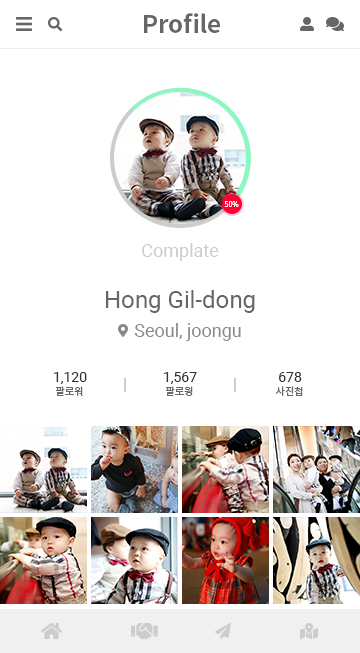
<style>
.page{position:relative;width:360px;height:653px;background:#ffffff}
.page>*{position:absolute;margin:0}
.t1{font:24px "NotoSansKR-Bold";color:#666666}
.t2{font:7px "NotoSansKR-Light";color:#ffffff}
.t3{font:18px "Roboto-Regular";color:#cccccc}
.t4{font:24px "Roboto-Regular";color:#666666}
.t5{font:18px "Roboto-Regular";color:#888888}
.t6{font:14px "Roboto-Regular";color:#333333}
.t7{font:10px "NotoSansKR-Regular";color:#666666}
</style>
<div class="page">
<p class="t1" style="left:144px;top:13px;width:76px;height:20px">Profile</p>
<p class="t2" style="left:224px;top:201px;width:15px;height:6px">50%</p>
<p class="t3" style="left:142px;top:243px;width:77px;height:18px">Complate</p>
<p class="t4" style="left:106px;top:290px;width:149px;height:23px">Hong Gil-dong</p>
<p class="t5" style="left:134px;top:323px;width:107px;height:18px">Seoul, joongu</p>
<p class="t6" style="left:54px;top:372px;width:33px;height:12px">1,120</p>
<p class="t6" style="left:164px;top:372px;width:33px;height:12px">1,567</p>
<p class="t6" style="left:279px;top:372px;width:23px;height:10px">678</p>
<p class="t7" style="left:55px;top:386px;width:28px;height:10px">팔로워</p>
<p class="t7" style="left:165px;top:386px;width:28px;height:10px">팔로윙</p>
<p class="t7" style="left:275px;top:386px;width:28px;height:10px">사진첩</p>
</div>
